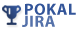
<style>
.page{position:relative;width:80px;height:30px;background:#ffffff}
.page>*{position:absolute;margin:0}
.t1{font:16.3px "MyriadPro-Bold";letter-spacing:0.035em;color:#335599}
.t2{font:16.3px "MyriadPro-Bold";letter-spacing:0.035em;color:#5572aa}
</style>
<div class="page">
<p class="t1" style="left:25px;top:3px;width:51px;height:12px">POKAL</p>
<p class="t2" style="left:22px;top:15px;width:33px;height:12px">JIRA</p>
</div>
